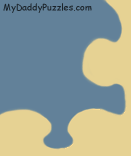
<style>
.page{position:relative;width:131px;height:156px;background:#628199}
.page>*{position:absolute;margin:0}
.t1{font:9px "ComicSansMS";color:#1b242b}
</style>
<div class="page">
<p class="t1" style="left:3px;top:3px;width:89px;height:10px">MyDaddyPuzzles.com</p>
</div>
